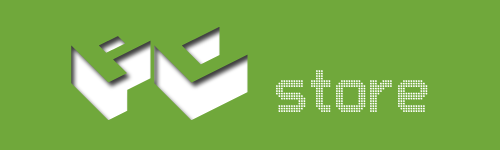
<style>
.page{position:relative;width:500px;height:150px;background:#70a83b}
.page>*{position:absolute;margin:0}
.t1{font:128px "Hexagon";color:#ffffff}
.t2{font:80px "Charlie-Dotted";color:#ffffff}
</style>
<div class="page">
<p class="t1" style="left:71px;top:27px;width:177px;height:93px">pc</p>
<p class="t2" style="left:276px;top:70px;width:152px;height:42px">store</p>
</div>
